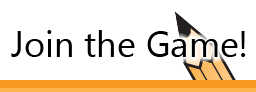
<style>
.page{position:relative;width:256px;height:92px;background:#ffffff}
.page>*{position:absolute;margin:0}
.t1{font:36px "SegoeUI";color:#000000}
</style>
<div class="page">
<p class="t1" style="left:11px;top:30px;width:235px;height:27px">Join the Game!</p>
</div>
